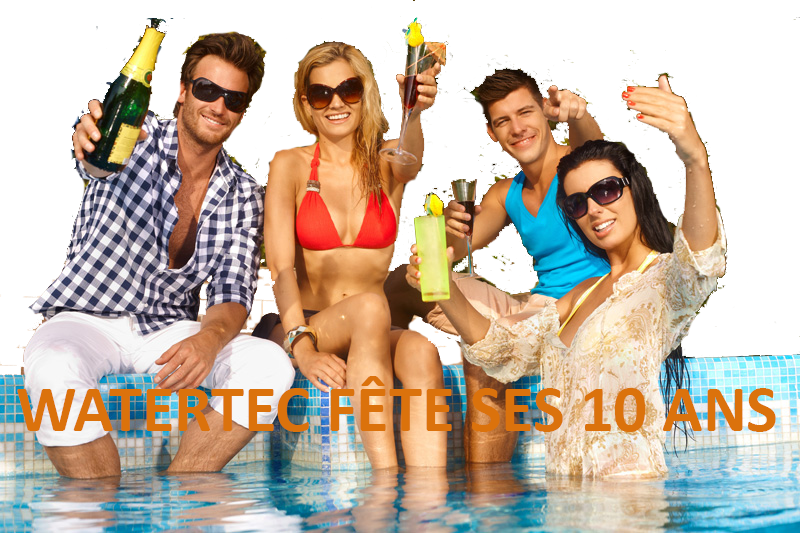
<style>
.page{position:relative;width:800px;height:533px;background:#ffffff}
.page>*{position:absolute;margin:0}
.t1{font:66.7px "Calibri-Bold";color:#db720c}
</style>
<div class="page">
<p class="t1" style="left:17px;top:376px;width:759px;height:56px">WATERTEC FÊTE SES 10 ANS</p>
</div>
